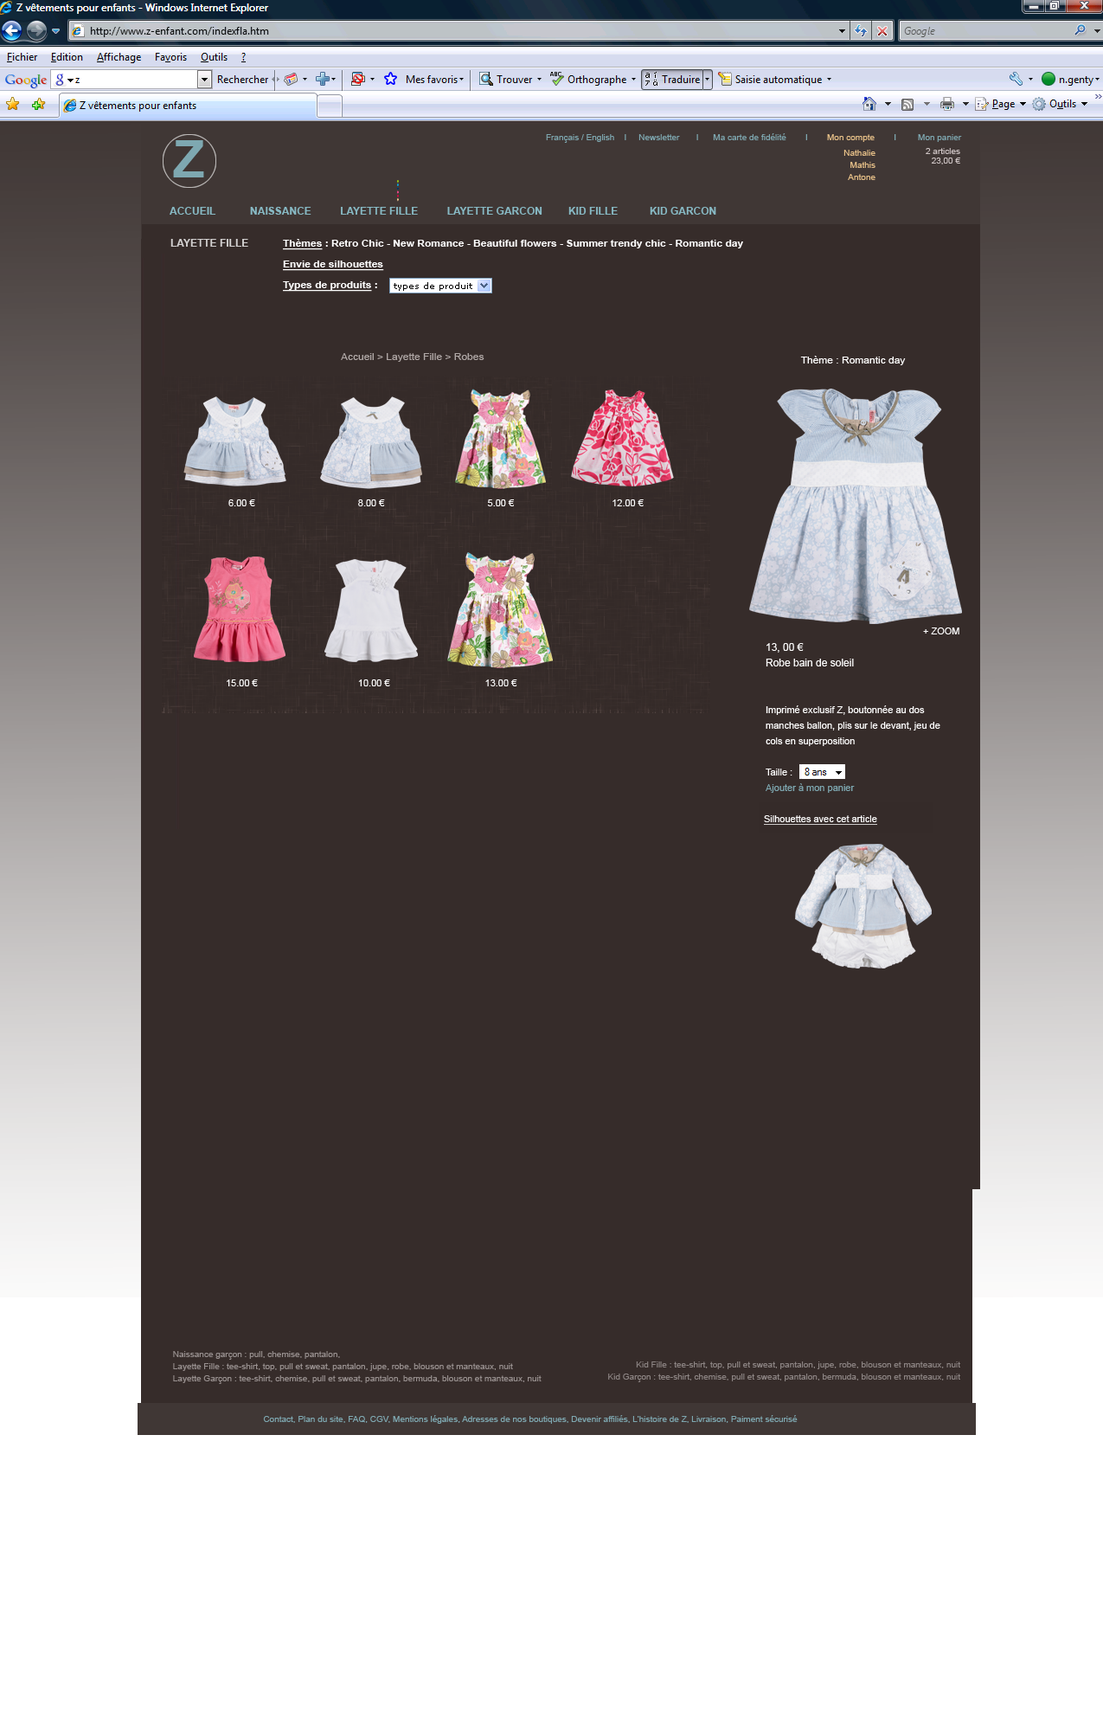
<style>
.page{position:relative;width:1103px;height:1731px;background:#362c2a}
.page>*{position:absolute;margin:0}
.t1{font:8.7px "ArialMT";color:#7ea8b1}
.t2{font:8.7px "ArialMT";color:#e9c289}
.t3{font:51.9px "Arial-BoldMT";color:#7ea8b1}
.t4{font:8.7px/12.1px "ArialMT";color:#e9c289}
.t5{font:8.7px/9.5px "ArialMT";color:#ccc2c2}
.t6{font:10.4px "Arial-BoldMT";color:#87b9c4}
.t7{font:10.4px "Arial-BoldMT";color:#ffffff}
.t8{font:10.4px "Arial-BoldMT";color:#d4d2d2}
.t9{font:9.3px/20.8px "Arial-BoldMT";color:#ffffff;scale:1.11 1}
.t10{font:9.3px/20.8px "Arial-BoldMT";color:#ffffff;text-decoration:underline;scale:1.11 1}
.t11{font:9.3px "ArialMT";color:#b0a8a6;scale:1.11 1}
.t12{font:9.3px "ArialMT";color:#ffffff;scale:1.11 1}
.t13{font:7.8px/12.1px "ArialMT";color:#98908f;scale:1.11 1}
.t14{font:7.8px/12.1px "ArialMT";color:#8b8382;scale:1.11 1}
.t15{font:7.8px "ArialMT";color:#7ea8b1;scale:1.11 1}
</style>
<div class="page">
<p class="t1" style="left:546px;top:133px;width:416px;height:10px">Français / English    I     Newsletter       I      Ma carte de fidélité        I        <span class="t2">Mon compte </span>       I         Mon panier</p>
<p class="t3" style="left:173px;top:140px;width:31px;height:37px">Z</p>
<p class="t4" style="left:844px;top:150px;width:32px;height:30px;text-align:right">Nathalie<br>Mathis<br>Antone</p>
<p class="t5" style="left:926px;top:148px;width:35px;height:16px;text-align:right">2 articles<br>23,00 €</p>
<p class="t6" style="left:170px;top:207px;width:547px;height:8px"><span class="t7"><br></span>ACCUEIL            NAISSANCE          LAYETTE FILLE          LAYETTE GARCON         KID FILLE           KID GARCON</p>
<p class="t8" style="left:170px;top:239px;width:78px;height:8px">LAYETTE FILLE</p>
<p class="t9" style="left:283px;top:239px;width:460px;height:53px"><span class="t10">Thèmes</span> : Retro Chic - New Romance - Beautiful flowers - Summer trendy chic - Romantic day<br><span class="t10">Envie de silhouettes <br>Types de produits</span> :</p>
<p class="t11" style="left:341px;top:353px;width:144px;height:9px">Accueil &gt; Layette Fille &gt; Robes</p>
<p class="t12" style="left:800px;top:356px;width:106px;height:9px">Thème : Romantic day</p>
<p class="t13" style="left:173px;top:1351px;width:369px;height:33px">Naissance garçon : pull, chemise, pantalon, <br>Layette Fille : tee-shirt, top, pull et sweat, pantalon, jupe, robe, blouson et manteaux, nuit<br>Layette Garçon : tee-shirt, chemise, pull et sweat, pantalon, bermuda, blouson et manteaux, nuit</p>
<p class="t14" style="left:608px;top:1361px;width:353px;height:21px;text-align:right">Kid Fille : tee-shirt, top, pull et sweat, pantalon, jupe, robe, blouson et manteaux, nuit<br>Kid Garçon : tee-shirt, chemise, pull et sweat, pantalon, bermuda, blouson et manteaux, nuit</p>
<p class="t15" style="left:263px;top:1415px;width:535px;height:9px">Contact, Plan du site, FAQ, CGV, Mentions légales, Adresses de nos boutiques, Devenir affiliés, L'histoire de Z, Livraison, Paiment sécurisé</p>
</div>
